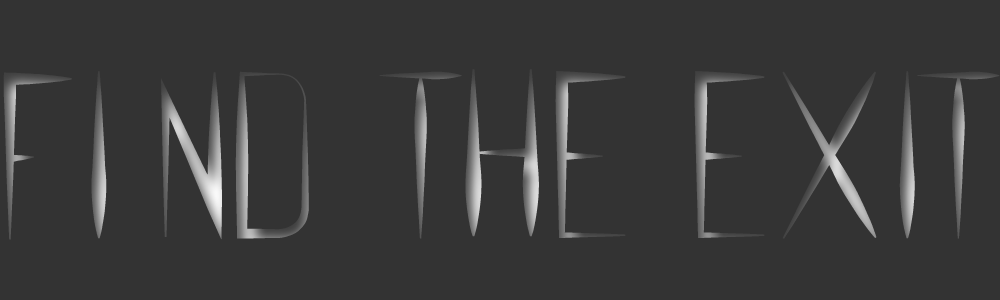
<style>
.page{position:relative;width:1000px;height:300px;background:#333333}
.page>*{position:absolute;margin:0}
.t1{font:208.3px "Feral-Regular"}
</style>
<div class="page">
<p class="t1" style="left:3px;top:69px;width:997px;height:171px">FI ND THE EXIT</p>
</div>
